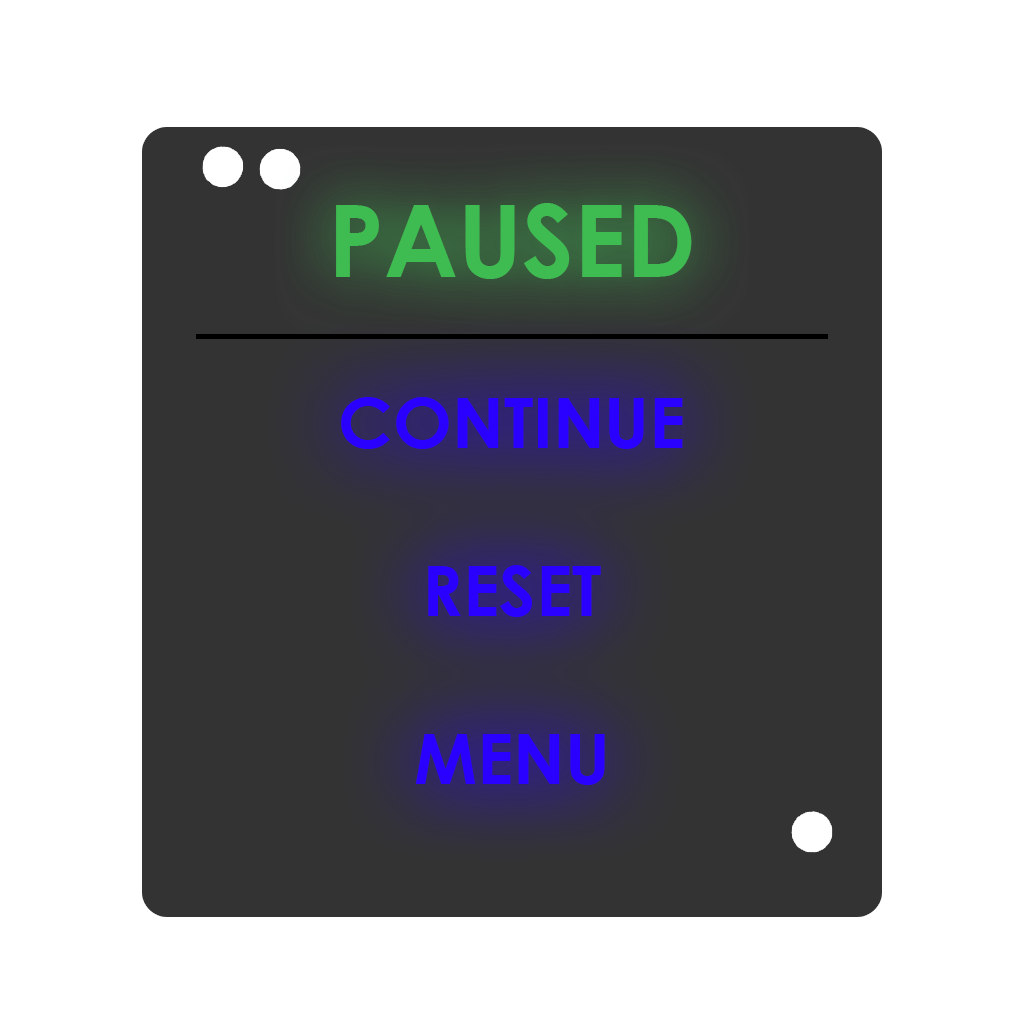
<style>
.page{position:relative;width:1024px;height:1024px;background:#ffffff}
.page>*{position:absolute;margin:0}
.t1{font:100px "CenturyGothic-Bold";color:#3fbc51}
.t2{font:70px "CenturyGothic-Bold";color:#2a00ff}
</style>
<div class="page">
<p class="t1" style="left:336px;top:203px;width:356px;height:76px">PAUSED</p>
<p class="t2" style="left:341px;top:397px;width:342px;height:388px;text-align:center">CONTINUE<br><br>RESET<br><br>MENU</p>
</div>
